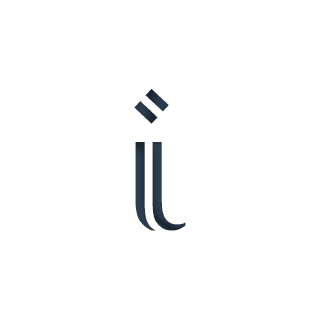
<style>
.page{position:relative;width:320px;height:320px;background:#ffffff}
.page>*{position:absolute;margin:0}
.t1{font:250px "ColonnaMT";color:#34495e}
</style>
<div class="page">
<p class="t1" style="left:134px;top:89px;width:52px;height:142px">i</p>
</div>
